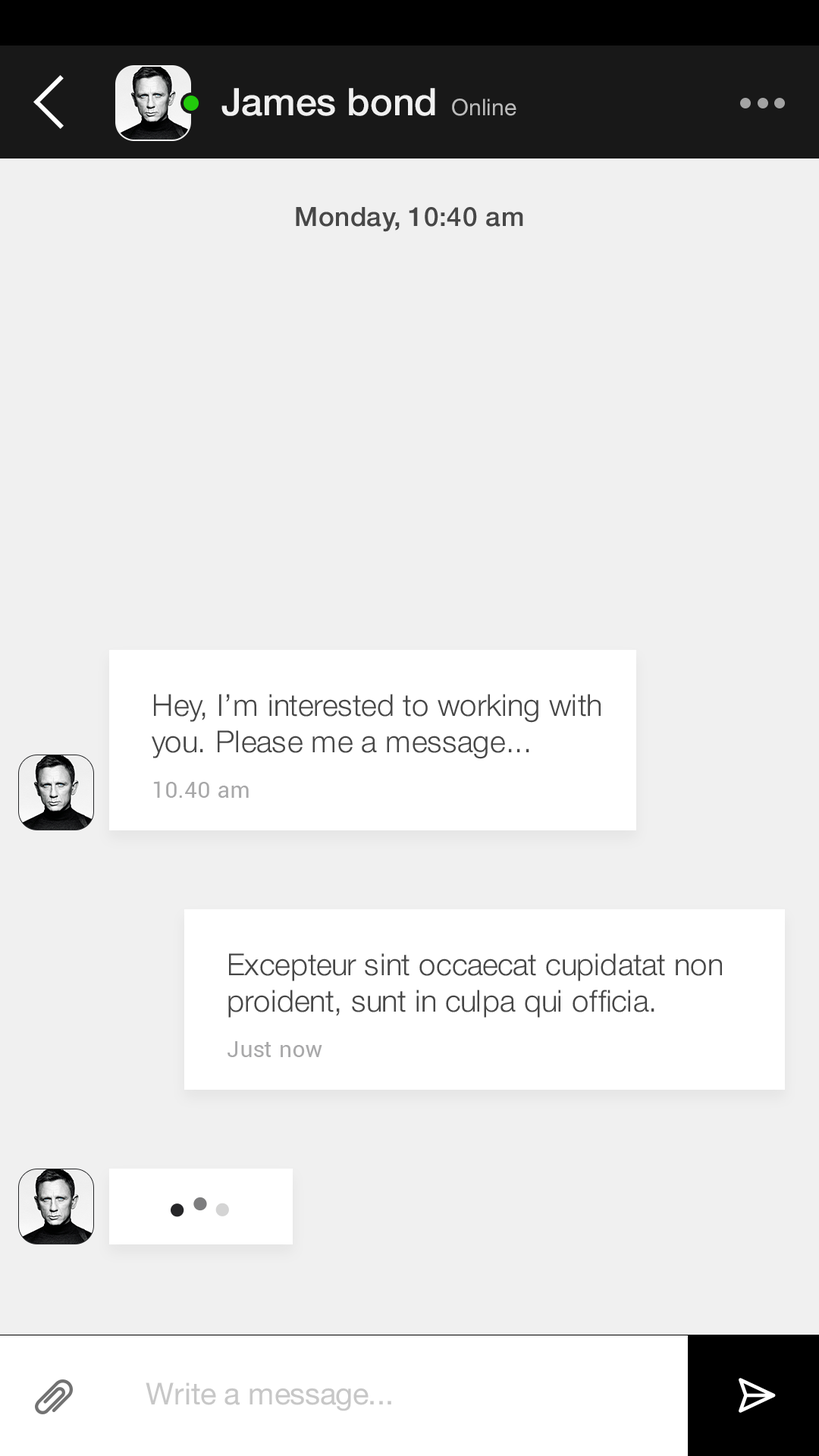
<style>
.page{position:relative;width:819px;height:1456px;background:#f0f0f0}
.page>*{position:absolute;margin:0}
.t1{font:37.9px "HelveticaNeue-Medium";color:#f0f0f0}
.t2{font:22.7px "HelveticaNeue";color:#bbbbbb}
.t3{font:26.5px "HelveticaNeue-Medium";letter-spacing:0.02em;color:#474747}
.t4{font:30.3px "HelveticaNeue-Light";color:#474747}
.t5{font:22.7px "Roboto-Regular";color:#a8a8a9}
.t6{font:30.3px "HelveticaNeue";color:#c7c7c7}
</style>
<div class="page">
<p class="t1" style="left:221px;top:88px;width:214px;height:28px">James bond</p>
<p class="t2" style="left:452px;top:99px;width:64px;height:17px">Online</p>
<p class="t3" style="left:296px;top:207px;width:227px;height:25px">Monday, 10:40 am</p>
<p class="t4" style="left:152px;top:694px;width:449px;height:65px">Hey, I’m interested to working with<br>you. Please me a message...</p>
<p class="t5" style="left:153px;top:781px;width:96px;height:17px">10.40 am</p>
<p class="t4" style="left:228px;top:953px;width:494px;height:65px">Excepteur sint occaecat cupidatat non<br>proident, sunt in culpa qui officia.</p>
<p class="t5" style="left:227px;top:1041px;width:95px;height:16px">Just now</p>
<p class="t6" style="left:146px;top:1382px;width:245px;height:29px">Write a message...</p>
</div>
